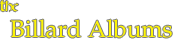
<style>
.page{position:relative;width:183px;height:43px;background:#ffffff}
.page>*{position:absolute;margin:0}
.t1{font:13.3px "OPENCLASSIC";color:#fcf306}
.t2{font:24px "Palatino-Roman";color:#fcf306}
</style>
<div class="page">
<p class="t1" style="left:0px;top:0px;width:19px;height:12px">the</p>
<p class="t2" style="left:10px;top:19px;width:162px;height:19px">Billard Albums</p>
</div>
